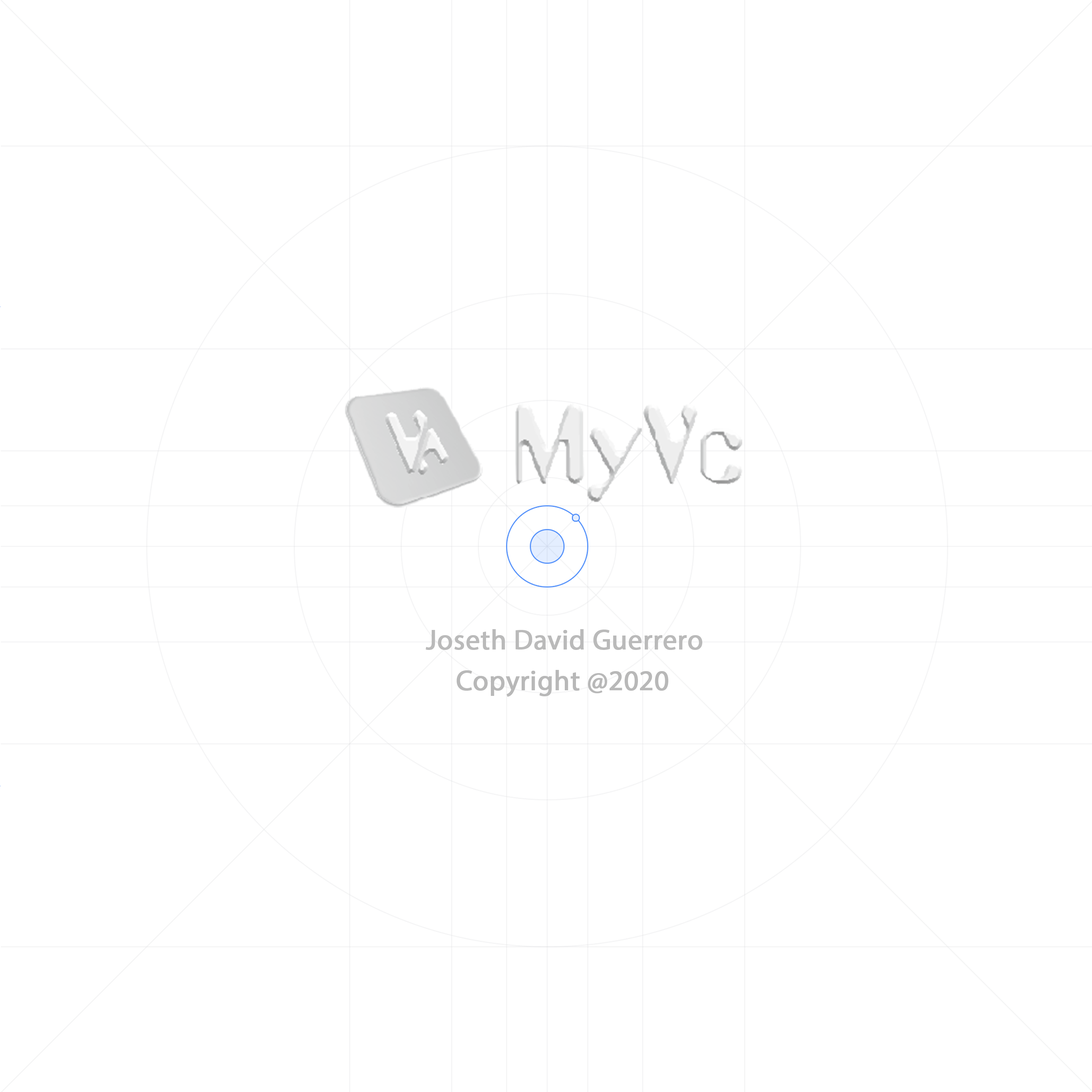
<style>
.page{position:relative;width:1092px;height:1092px;background:#ffffff}
.page>*{position:absolute;margin:0}
.t1{font:28.2px "MyriadPro-Regular";color:#bababa;font-weight:bold}
.t2{font:28.2px "MyriadPro-Regular";color:#b8b8b8;font-weight:bold}
</style>
<div class="page">
<p class="t1" style="left:426px;top:629px;width:276px;height:21px">Joseth David Guerrero</p>
<p class="t2" style="left:456px;top:670px;width:212px;height:27px">Copyright @2020</p>
</div>
